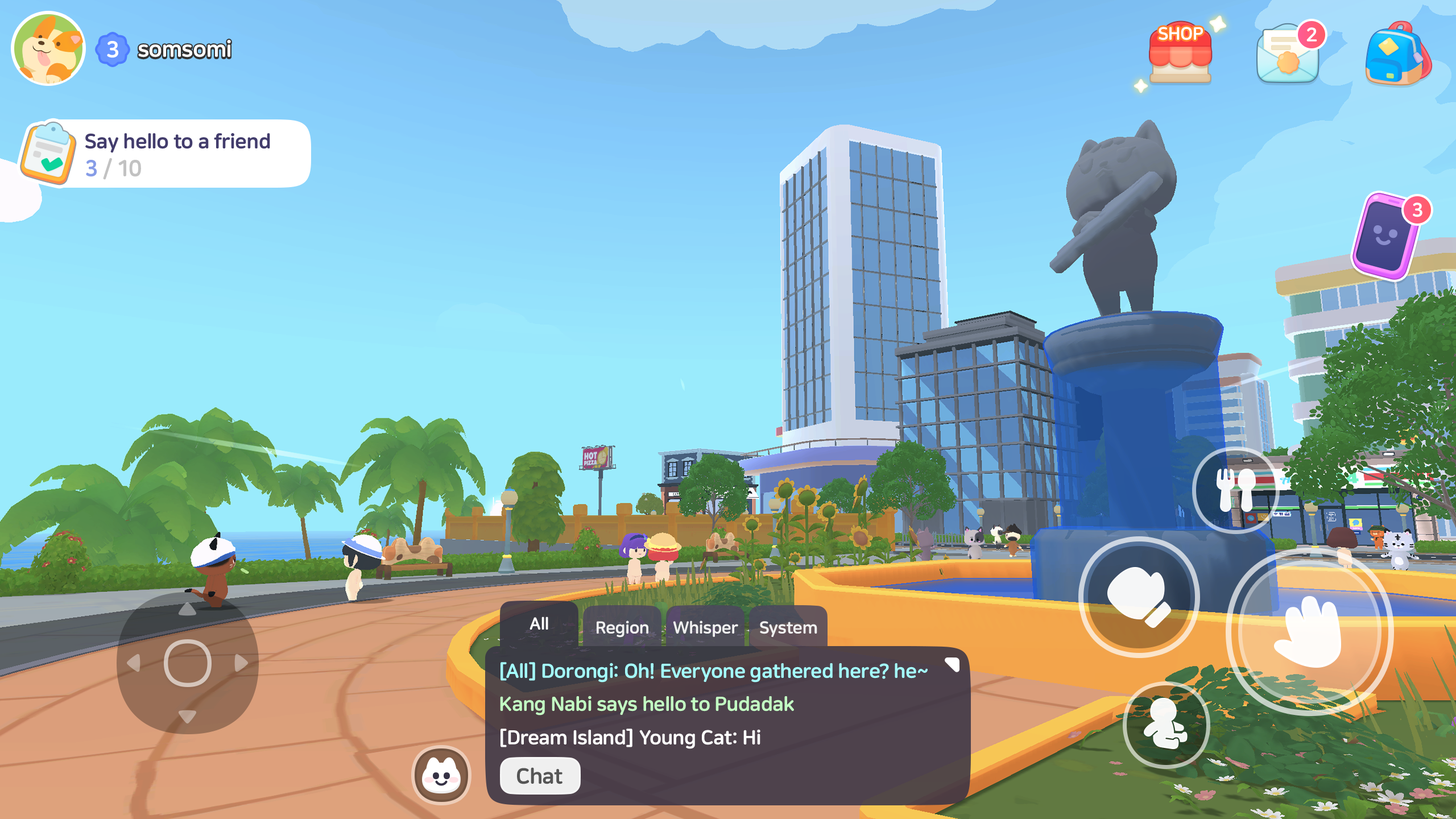
<style>
.page{position:relative;width:1456px;height:819px}
.page>*{position:absolute;margin:0}
.t1{font:17.7px "NanumSquareRoundEB";letter-spacing:-0.02em;color:#ffffff;text-transform:uppercase}
.t2{font:19.3px "NanumSquareRoundEB";letter-spacing:-0.02em;color:#ffffff}
.t3{font:22.7px "NanumSquareRoundEB";letter-spacing:-0.02em;color:#ffffff}
.t4{font:20.5px "NanumSquareRoundEB";letter-spacing:-0.02em;color:#423c6c}
.t5{font:22.7px "NanumSquareRoundEB";letter-spacing:-0.02em;color:#c2c2c2;scale:0.95 1}
.t6{font:22.7px "NanumSquareRoundEB";letter-spacing:-0.02em;color:#869ce7;scale:0.95 1}
.t7{font:17.1px "NanumSquareRoundEB";letter-spacing:-0.02em;color:#ffffff}
.t8{font:17.1px "NanumSquareRoundEB";letter-spacing:-0.02em;color:#f0f0f0}
.t9{font:19.9px "NanumSquareRoundEB";letter-spacing:-0.02em;color:#a4ffff}
.t10{font:19.9px "NanumSquareRoundEB";letter-spacing:-0.02em;color:#c3ffc3}
.t11{font:19.9px "NanumSquareRoundEB";letter-spacing:-0.02em;color:#ffffff}
.t12{font:21.6px "NanumSquareRoundEB";letter-spacing:-0.02em;color:#555555}
</style>
<div class="page">
<p class="t1" style="left:1159px;top:27px;width:44px;height:13px">shop</p>
<p class="t2" style="left:1306px;top:27px;width:11px;height:15px">2</p>
<p class="t3" style="left:107px;top:41px;width:11px;height:17px">3</p>
<p class="t3" style="left:138px;top:40px;width:93px;height:17px">somsomi</p>
<p class="t4" style="left:85px;top:133px;width:185px;height:20px">Say hello to a friend</p>
<p class="t5" style="left:86px;top:158px;width:55px;height:22px"><span class="t6">3 </span>/ 10</p>
<p class="t2" style="left:1413px;top:202px;width:9px;height:15px">3</p>
<p class="t7" style="left:529px;top:617px;width:19px;height:13px">All</p>
<p class="t8" style="left:597px;top:620px;width:51px;height:18px">Region</p>
<p class="t8" style="left:673px;top:620px;width:65px;height:17px">Whisper</p>
<p class="t8" style="left:760px;top:621px;width:57px;height:16px">System</p>
<p class="t9" style="left:500px;top:662px;width:428px;height:20px">[All] Dorongi: Oh! Everyone gathered here? he~</p>
<p class="t10" style="left:500px;top:696px;width:294px;height:19px">Kang Nabi says hello to Pudadak</p>
<p class="t11" style="left:500px;top:729px;width:260px;height:20px">[Dream Island] Young Cat: Hi</p>
<p class="t12" style="left:517px;top:767px;width:45px;height:17px">Chat</p>
</div>
